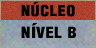
<style>
.page{position:relative;width:96px;height:48px}
.page>*{position:absolute;margin:0}
.t1{font:14.7px "HelveticaLT-Condensed-Black";letter-spacing:0.04em;color:#000000;scale:1.1 1}
.t2{font:15.5px "HelveticaLT-Condensed-Black";letter-spacing:0.05em;color:#000000;scale:1.1 1}
</style>
<div class="page">
<p class="t1" style="left:21px;top:1px;width:54px;height:16px">NÚCLEO</p>
<p class="t2" style="left:21px;top:23px;width:58px;height:16px">NÍVEL B</p>
</div>
